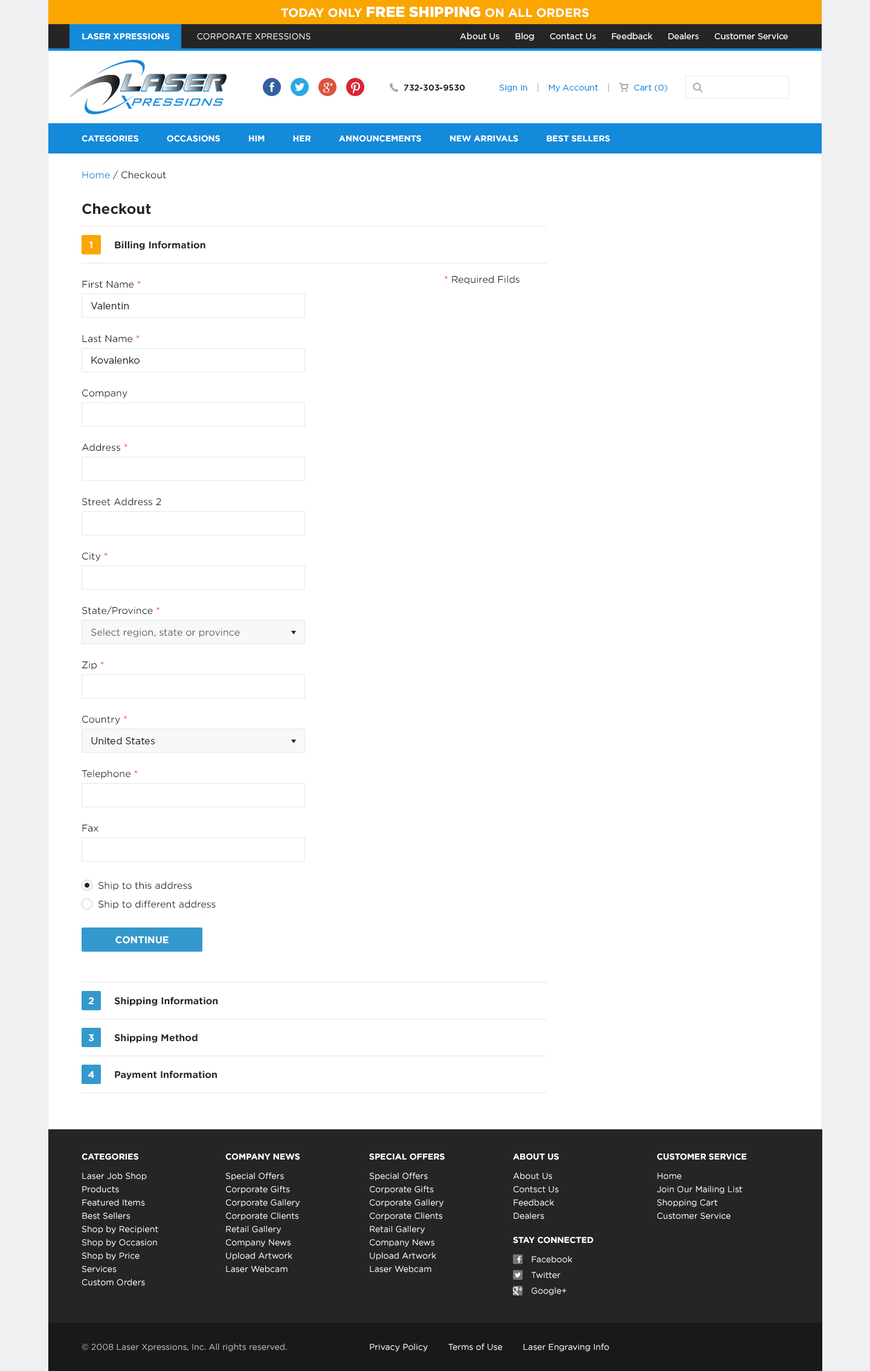
<style>
.page{position:relative;width:870px;height:1371px;background:#ffffff}
.page>*{position:absolute;margin:0}
.t1{font:14.5px "GothamPro-Black";color:#ffffff;text-transform:uppercase}
.t2{font:12.1px "GothamPro-Bold";color:#ffffff;text-transform:uppercase}
.t3{font:8.5px "GothamPro-Bold";color:#ffffff;text-transform:uppercase}
.t4{font:8.5px "GothamPro";color:#ffffff;text-transform:uppercase}
.t5{font:8.5px "GothamPro";color:#ffffff}
.t6{font:8.5px "GothamPro-Bold";color:#252526}
.t7{font:8.5px "GothamPro";color:#138ada}
.t8{font:9.7px "GothamPro";color:#252526}
.t9{font:9.7px "GothamPro";color:#138ada}
.t10{font:14.5px "GothamPro-Bold";color:#252526}
.t11{font:9.7px "GothamPro-Bold";color:#ffffff;text-transform:uppercase}
.t12{font:9.7px "GothamPro-Bold";color:#252526}
.t13{font:9.7px "GothamPro";color:#ff1d1a}
.t14{font:9.7px "GothamPro";color:#575759}
.t15{font:8.5px/13.3px "GothamPro";color:#ffffff}
.t16{font:8.5px/26.6px "GothamPro-Bold";color:#ffffff;text-transform:uppercase}
.t17{font:8.5px/19.3px "GothamPro";color:#ffffff}
.t18{font:8.5px/15.7px "GothamPro";color:#ffffff}
.t19{font:8.5px "GothamPro";color:#bdbdbf}
</style>
<div class="page">
<p class="t1" style="left:281px;top:7px;width:308px;height:11px"><span class="t2">Today Only </span>Free Shipping<span class="t2"> on All orders</span></p>
<p class="t3" style="left:82px;top:33px;width:88px;height:7px">Laser Xpressions</p>
<p class="t4" style="left:197px;top:33px;width:114px;height:7px">Corporate Xpressions</p>
<p class="t5" style="left:460px;top:33px;width:328px;height:8px">About Us      Blog      Contact Us      Feedback      Dealers      Customer Service</p>
<p class="t6" style="left:404px;top:85px;width:61px;height:6px">732-303-9530</p>
<p class="t7" style="left:499px;top:85px;width:169px;height:7px">Sign In        My Account              Cart (0)</p>
<p class="t3" style="left:82px;top:135px;width:528px;height:7px">Categories           Occasions           Him           Her           Announcements           New Arrivals           Best Sellers</p>
<p class="t8" style="left:82px;top:170px;width:84px;height:9px"><span class="t9">Home</span> / Checkout</p>
<p class="t10" style="left:82px;top:203px;width:69px;height:11px">Checkout</p>
<p class="t11" style="left:89px;top:241px;width:3px;height:7px">1</p>
<p class="t12" style="left:115px;top:241px;width:90px;height:9px">Billing Information</p>
<p class="t8" style="left:82px;top:280px;width:59px;height:8px">First Name <span class="t13">*</span></p>
<p class="t8" style="left:445px;top:275px;width:75px;height:10px"><span class="t13">*</span> Required Filds</p>
<p class="t8" style="left:91px;top:302px;width:38px;height:7px">Valentin</p>
<p class="t8" style="left:82px;top:335px;width:58px;height:8px">Last Name <span class="t13">*</span></p>
<p class="t8" style="left:91px;top:356px;width:49px;height:8px">Kovalenko</p>
<p class="t8" style="left:82px;top:389px;width:45px;height:9px">Company</p>
<p class="t8" style="left:82px;top:443px;width:45px;height:8px">Address <span class="t13">*</span></p>
<p class="t8" style="left:82px;top:498px;width:79px;height:8px">Street Address 2</p>
<p class="t8" style="left:82px;top:552px;width:26px;height:9px">City <span class="t13">*</span></p>
<p class="t8" style="left:82px;top:606px;width:77px;height:9px">State/Province <span class="t13">*</span></p>
<p class="t14" style="left:91px;top:628px;width:149px;height:9px">Select region, state or province</p>
<p class="t8" style="left:82px;top:661px;width:22px;height:9px">Zip <span class="t13">*</span></p>
<p class="t8" style="left:82px;top:715px;width:45px;height:9px">Country <span class="t13">*</span></p>
<p class="t8" style="left:91px;top:737px;width:64px;height:7px">United States</p>
<p class="t8" style="left:82px;top:770px;width:56px;height:9px">Telephone <span class="t13">*</span></p>
<p class="t8" style="left:82px;top:824px;width:16px;height:8px">Fax</p>
<p class="t8" style="left:98px;top:881px;width:94px;height:9px">Ship to this address</p>
<p class="t8" style="left:98px;top:900px;width:118px;height:9px">Ship to different address</p>
<p class="t11" style="left:115px;top:936px;width:54px;height:8px">Continue</p>
<p class="t11" style="left:88px;top:997px;width:6px;height:7px">2</p>
<p class="t12" style="left:114px;top:997px;width:104px;height:9px">Shipping Information</p>
<p class="t11" style="left:88px;top:1034px;width:6px;height:7px">3</p>
<p class="t12" style="left:114px;top:1034px;width:84px;height:9px">Shipping Method</p>
<p class="t11" style="left:88px;top:1070px;width:6px;height:8px">4</p>
<p class="t12" style="left:115px;top:1070px;width:102px;height:10px">Payment Information</p>
<p class="t15" style="left:82px;top:1153px;width:76px;height:133px"><span class="t16">Categories<br></span><span class="t17">Laser Job Shop<br></span>Products<br>Featured Items<br>Best Sellers<br>Shop by Recipient<br>Shop by Occasion<br>Shop by Price<br>Services<br>Custom Orders</p>
<p class="t15" style="left:225px;top:1153px;width:75px;height:119px"><span class="t16">Company News<br></span><span class="t17">Special Offers<br></span>Corporate Gifts<br>Corporate Gallery<br>Corporate Clients<br>Retail Gallery<br>Company News<br>Upload Artwork<br>Laser Webcam</p>
<p class="t15" style="left:369px;top:1153px;width:76px;height:119px"><span class="t16">Special Offers<br></span><span class="t17">Special Offers<br></span>Corporate Gifts<br>Corporate Gallery<br>Corporate Clients<br>Retail Gallery<br>Company News<br>Upload Artwork<br>Laser Webcam</p>
<p class="t15" style="left:513px;top:1153px;width:46px;height:66px"><span class="t16">About Us<br></span><span class="t17">About Us<br></span>Contsct Us<br>Feedback<br>Dealers</p>
<p class="t15" style="left:657px;top:1153px;width:90px;height:66px"><span class="t16">Customer Service<br></span><span class="t17">Home<br></span>Join Our Mailing List<br>Shopping Cart<br>Customer Service</p>
<p class="t18" style="left:513px;top:1237px;width:80px;height:58px"><span class="t16">Stay Connected<br></span><span class="t17">Facebook<br></span>Twitter<br>Google+</p>
<p class="t19" style="left:82px;top:1343px;width:205px;height:8px">© 2008 Laser Xpressions, Inc. All rights reserved.</p>
<p class="t5" style="left:370px;top:1343px;width:239px;height:8px">Privacy Policy        Terms of Use        Laser Engraving Info</p>
</div>
